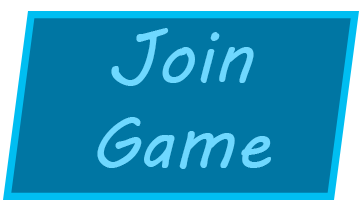
<style>
.page{position:relative;width:360px;height:216px;background:#0076a3}
.page>*{position:absolute;margin:0}
.t1{font:72px "MVBoli";color:#6ed9ff}
</style>
<div class="page">
<p class="t1" style="left:97px;top:28px;width:174px;height:141px;text-align:center">Join<br>Game</p>
</div>
